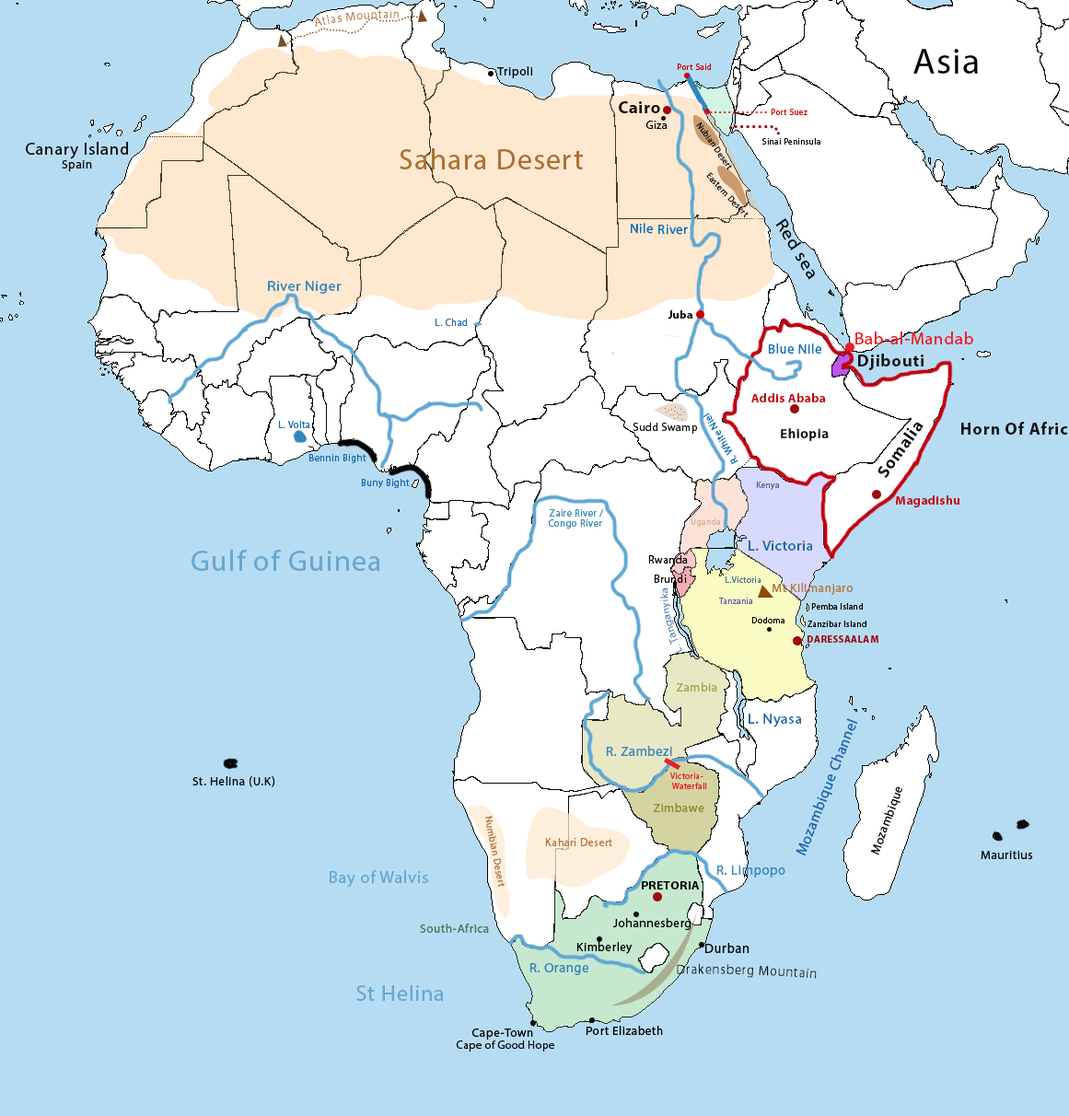
<style>
.page{position:relative;width:1069px;height:1116px;background:#b6dcf4}
.page>*{position:absolute;margin:0}
.t1{font:12.3px "MyriadHebrew-Regular";letter-spacing:0.04em;color:#ad7232}
.t2{font:36.8px "MyriadHebrew-Regular";letter-spacing:0.04em;color:#000000}
.t3{font:8.6px "MyriadHebrew-Regular";letter-spacing:0.04em;color:#ce0000}
.t4{font:12.3px "MyriadHebrew-Regular";letter-spacing:0.04em;color:#010101}
.t5{font:17.2px "MyriadHebrew-Bold";letter-spacing:0.04em;color:#050708}
.t6{font:11px "MyriadHebrew-Regular";letter-spacing:0.04em;color:#050708}
.t7{font:8.6px "MyriadHebrew-Regular";letter-spacing:0.04em;color:#050708}
.t8{font:17.2px "MyriadHebrew-Regular";letter-spacing:0.04em;color:#0a0a0a}
.t9{font:29.5px "MyriadHebrew-Regular";letter-spacing:0.04em;color:#ad7232}
.t10{font:12.3px "MyriadHebrew-Regular";letter-spacing:0.04em;color:#0a0a0a}
.t11{font:17.2px "MyriadHebrew-Regular";letter-spacing:0.04em;color:#000000;scale:1.12 1}
.t12{font:13.5px "MyriadHebrew-Regular";letter-spacing:0.04em;color:#0673b7}
.t13{font:14.7px "MyriadHebrew-Regular";letter-spacing:0.04em;color:#388abe}
.t14{font:11px "MyriadHebrew-Bold";letter-spacing:0.04em;color:#121212}
.t15{font:9.8px "MyriadHebrew-Regular";letter-spacing:0.04em;color:#1969ad}
.t16{font:17.2px "MyriadHebrew-Regular";letter-spacing:0.04em;color:#ed1c24}
.t17{font:17.2px "MyriadHebrew-Bold";letter-spacing:0.04em;color:#111212}
.t18{font:12.3px "MyriadHebrew-Bold";letter-spacing:0.04em;color:#c3010f}
.t19{font:10.1px "MyriadHebrew-Regular";letter-spacing:0.04em;color:#0673b7}
.t20{font:11px "MyriadHebrew-Regular";letter-spacing:0.04em;color:#121212}
.t21{font:13.5px "MyriadHebrew-Bold";letter-spacing:0.04em;color:#111212}
.t22{font:8.6px "MyriadHebrew-Regular";letter-spacing:0.04em;color:#5c60a6}
.t23{font:9.8px "MyriadHebrew-Regular";letter-spacing:0.04em;color:#388abe}
.t24{font:8.6px "MyriadHebrew-Regular";letter-spacing:0.04em;color:#dcb0a0}
.t25{font:14.7px "MyriadHebrew-Regular";letter-spacing:0.04em;color:#1969ad}
.t26{font:29.5px "MyriadHebrew-Regular";letter-spacing:0.04em;color:#69a7cf}
.t27{font:11px "MyriadHebrew-Regular";letter-spacing:0.04em;color:#000000}
.t28{font:8.6px "MyriadHebrew-Regular";letter-spacing:0.04em;color:#437595}
.t29{font:10.3px "MyriadHebrew-Regular";letter-spacing:0.04em;color:#1b6aad}
.t30{font:12.3px "MyriadHebrew-Regular";letter-spacing:0.04em;color:#b6773d}
.t31{font:8.6px "MyriadHebrew-Regular";letter-spacing:0.04em;color:#000000}
.t32{font:9.8px "MyriadHebrew-Bold";letter-spacing:0.04em;color:#9e0b0f}
.t33{font:12.3px "MyriadHebrew-Regular";letter-spacing:0.04em;color:#a7a753}
.t34{font:11px "MyriadHebrew-Regular";letter-spacing:0.04em;color:#1969ad}
.t35{font:13.5px "MyriadHebrew-Regular";letter-spacing:0.04em;color:#3788bc}
.t36{font:8.6px "MyriadHebrew-Regular";letter-spacing:0.04em;color:#ed1c24}
.t37{font:12.3px "MyriadHebrew-Regular";letter-spacing:0.04em;color:#8c8c35}
.t38{font:9.8px "MyriadHebrew-Regular";letter-spacing:0.04em;color:#b6773d}
.t39{font:11px "MyriadHebrew-Regular";letter-spacing:0.04em;color:#b6773d}
.t40{font:17.2px "MyriadHebrew-Regular";letter-spacing:0.04em;color:#69a7cf}
.t41{font:12.3px "MyriadHebrew-Bold";letter-spacing:0.04em;color:#000000}
.t42{font:12.3px "MyriadHebrew-Regular";letter-spacing:0.04em;color:#000000}
.t43{font:12.3px "MyriadHebrew-Regular";letter-spacing:0.04em;color:#477b55}
.t44{font:13.5px "MyriadHebrew-Regular";letter-spacing:0.04em;color:#000000}
.t45{font:13.5px "MyriadHebrew-Regular";letter-spacing:0.04em;color:#050708}
.t46{font:22.1px "MyriadHebrew-Regular";letter-spacing:0.04em;color:#69a7cf}
.t47{font:11px "MyriadHebrew-Regular";letter-spacing:0.04em;color:#0a0a0a}
</style>
<div class="page">
<p class="t1" style="left:315px;top:9px;width:84px;height:18px;rotate:-6deg">Atlas Mountain</p>
<p class="t2" style="left:913px;top:49px;width:65px;height:25px">Asia</p>
<p class="t3" style="left:677px;top:64px;width:35px;height:6px">Port Said</p>
<p class="t4" style="left:497px;top:66px;width:36px;height:12px">Tripoli</p>
<p class="t5" style="left:619px;top:101px;width:41px;height:12px">Cairo</p>
<p class="t3" style="left:771px;top:109px;width:36px;height:6px">Port Suez</p>
<p class="t6" style="left:645px;top:121px;width:22px;height:8px">Giza</p>
<p class="t7" style="left:696px;top:122px;width:36px;height:48px;rotate:54deg">Nubian Desert</p>
<p class="t8" style="left:26px;top:142px;width:102px;height:17px">Canary Island</p>
<p class="t9" style="left:400px;top:148px;width:183px;height:21px">Sahara Desert</p>
<p class="t7" style="left:762px;top:138px;width:58px;height:7px">Sinai Peninsula</p>
<p class="t10" style="left:62px;top:160px;width:30px;height:11px">Spain</p>
<p class="t7" style="left:706px;top:172px;width:42px;height:45px;rotate:47deg">Eastern Desert</p>
<p class="t11" style="left:775px;top:218px;width:40px;height:62px;rotate:59deg">Red sea</p>
<p class="t12" style="left:631px;top:223px;width:57px;height:12px;rotate:1deg">Nile River</p>
<p class="t13" style="left:268px;top:281px;width:74px;height:13px">River Niger</p>
<p class="t14" style="left:667px;top:310px;width:25px;height:9px">Juba</p>
<p class="t15" style="left:435px;top:319px;width:33px;height:7px">L. Chad</p>
<p class="t16" style="left:855px;top:331px;width:118px;height:13px">Bab-al-Mandab</p>
<p class="t12" style="left:768px;top:343px;width:54px;height:10px">Blue Nile</p>
<p class="t17" style="left:858px;top:353px;width:65px;height:17px">Djibouti</p>
<p class="t18" style="left:751px;top:393px;width:74px;height:9px">Addis Ababa</p>
<p class="t19" style="left:702px;top:412px;width:36px;height:52px;rotate:-121deg">R. White Niel</p>
<p class="t15" style="left:278px;top:421px;width:32px;height:7px">L. Volta</p>
<p class="t20" style="left:632px;top:423px;width:66px;height:11px">Sudd Swamp</p>
<p class="t17" style="left:877px;top:422px;width:46px;height:56px;rotate:-55deg">Somalia</p>
<p class="t21" style="left:781px;top:428px;width:47px;height:13px">Ehiopia</p>
<p class="t15" style="left:308px;top:454px;width:58px;height:9px">Bennin Bight</p>
<p class="t15" style="left:361px;top:479px;width:49px;height:9px">Buny Bight</p>
<p class="t22" style="left:756px;top:481px;width:23px;height:9px">Kenya</p>
<p class="t18" style="left:896px;top:495px;width:63px;height:12px">Magadishu</p>
<p class="t23" style="left:549px;top:509px;width:54px;height:7px">Zaire River /</p>
<p class="t23" style="left:548px;top:519px;width:54px;height:9px">Congo River</p>
<p class="t24" style="left:690px;top:518px;width:30px;height:9px">Uganda</p>
<p class="t25" style="left:748px;top:540px;width:64px;height:10px">L. Victoria</p>
<p class="t26" style="left:191px;top:550px;width:189px;height:21px">Gulf of Guinea</p>
<p class="t27" style="left:648px;top:555px;width:40px;height:8px">Rwanda</p>
<p class="t27" style="left:654px;top:574px;width:33px;height:9px">Brundi</p>
<p class="t28" style="left:725px;top:576px;width:36px;height:7px">L.Victoria</p>
<p class="t29" style="left:660px;top:588px;width:22px;height:67px;rotate:-103deg">L. Tanganyika</p>
<p class="t30" style="left:771px;top:583px;width:82px;height:12px">Mt Kilimanjaro</p>
<p class="t22" style="left:719px;top:597px;width:34px;height:7px">Tanzania</p>
<p class="t31" style="left:811px;top:603px;width:52px;height:6px">Pemba Island</p>
<p class="t31" style="left:751px;top:617px;width:33px;height:6px">Dodoma</p>
<p class="t31" style="left:807px;top:620px;width:59px;height:7px">Zanzibar Island</p>
<p class="t32" style="left:807px;top:635px;width:71px;height:8px">DARESSAALAM</p>
<p class="t33" style="left:676px;top:682px;width:41px;height:9px">Zambia</p>
<p class="t34" style="left:748px;top:713px;width:53px;height:14px">L. Nyasa</p>
<p class="t34" style="left:795px;top:718px;width:63px;height:138px;rotate:-68deg">Mozambique Channel</p>
<p class="t35" style="left:606px;top:746px;width:66px;height:10px">R. Zambezi</p>
<p class="t36" style="left:670px;top:772px;width:37px;height:17px">Victoria-<br> Waterfall</p>
<p class="t10" style="left:192px;top:776px;width:83px;height:11px">St. Helina (U.K)</p>
<p class="t10" style="left:871px;top:786px;width:31px;height:69px;rotate:-70deg">Mozambique</p>
<p class="t37" style="left:653px;top:803px;width:51px;height:9px">Zimbawe</p>
<p class="t38" style="left:485px;top:816px;width:19px;height:71px;rotate:79deg">Numbian Desert</p>
<p class="t39" style="left:545px;top:838px;width:67px;height:8px">Kahari Desert</p>
<p class="t10" style="left:980px;top:851px;width:53px;height:8px">Mauritius</p>
<p class="t40" style="left:330px;top:870px;width:98px;height:17px">Bay of Walvis</p>
<p class="t35" style="left:716px;top:865px;width:69px;height:12px">R. Limpopo</p>
<p class="t41" style="left:642px;top:881px;width:58px;height:8px">PRETORIA</p>
<p class="t42" style="left:613px;top:918px;width:78px;height:12px">Johannesberg</p>
<p class="t43" style="left:420px;top:923px;width:69px;height:10px">South-Africa</p>
<p class="t42" style="left:576px;top:942px;width:56px;height:12px">Kimberley</p>
<p class="t44" style="left:704px;top:943px;width:45px;height:10px">Durban</p>
<p class="t35" style="left:529px;top:963px;width:60px;height:12px">R. Orange</p>
<p class="t45" style="left:677px;top:963px;width:140px;height:16px;rotate:2deg">Drakensberg Mountain</p>
<p class="t46" style="left:356px;top:985px;width:88px;height:16px">St Helina</p>
<p class="t42" style="left:585px;top:1025px;width:78px;height:10px">Port Elizabeth</p>
<p class="t42" style="left:471px;top:1028px;width:62px;height:11px">Cape-Town</p>
<p class="t47" style="left:456px;top:1040px;width:99px;height:11px">Cape of Good Hope</p>
</div>
